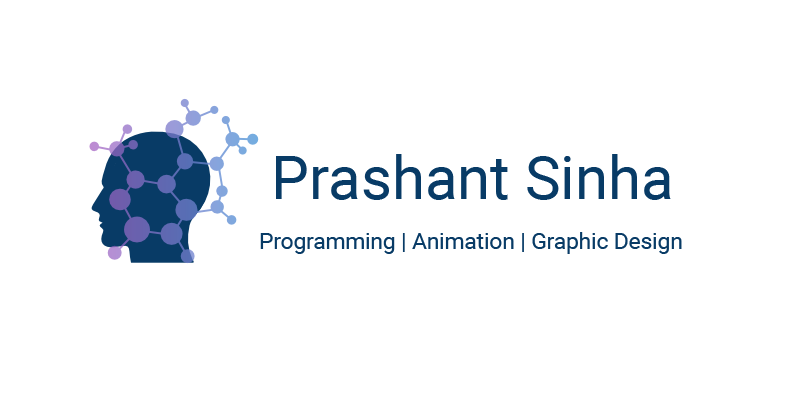
<style>
.page{position:relative;width:800px;height:400px;background:#ffffff}
.page>*{position:absolute;margin:0}
.t1{font:60px "Roboto-Regular";color:#083b66}
.t2{font:22.5px "Roboto-Regular";color:#083b66}
</style>
<div class="page">
<p class="t1" style="left:276px;top:154px;width:395px;height:46px">Prashant Sinha</p>
<p class="t2" style="left:260px;top:232px;width:422px;height:22px">Programming | Animation | Graphic Design</p>
</div>
